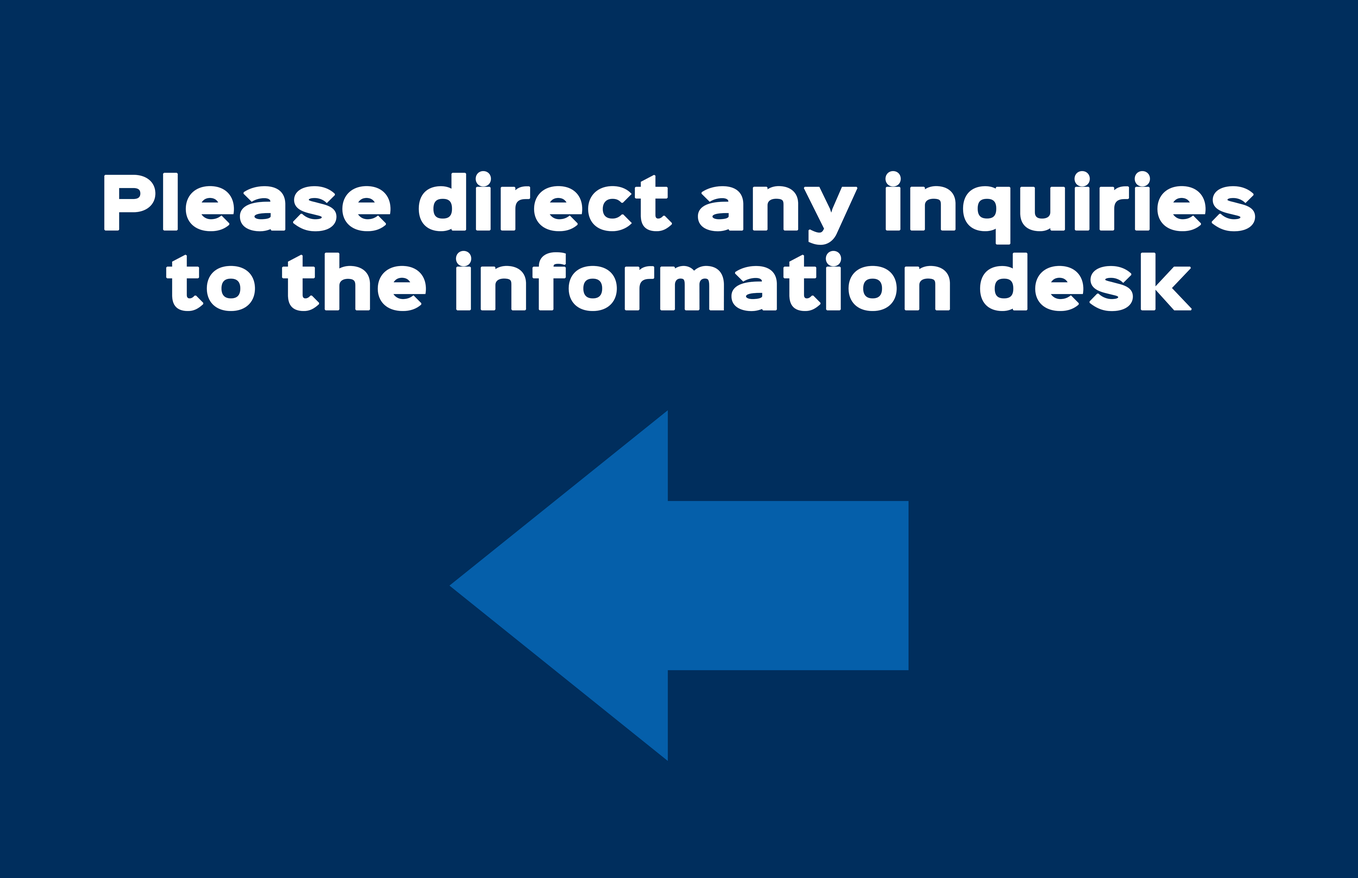
<style>
.page{position:relative;width:1358px;height:878px;background:#002e5d}
.page>*{position:absolute;margin:0}
.t1{font:66.5px "SinkinSans-800Black";color:#ffffff;font-weight:bold}
</style>
<div class="page">
<p class="t1" style="left:104px;top:171px;width:1151px;height:140px;text-align:center">Please direct any inquiries to the information desk</p>
</div>
